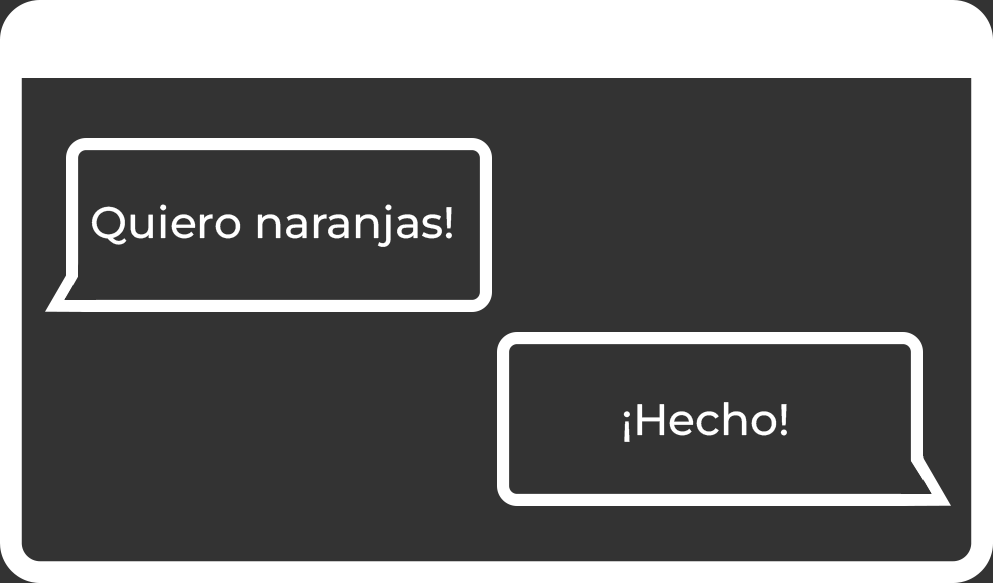
<style>
.page{position:relative;width:993px;height:583px;background:#333333}
.page>*{position:absolute;margin:0}
.t1{font:44px "MontserratRoman-Medium";color:#ffffff}
</style>
<div class="page">
<p class="t1" style="left:91px;top:204px;width:361px;height:43px">Quiero naranjas!</p>
<p class="t1" style="left:623px;top:402px;width:164px;height:40px">¡Hecho!</p>
</div>
